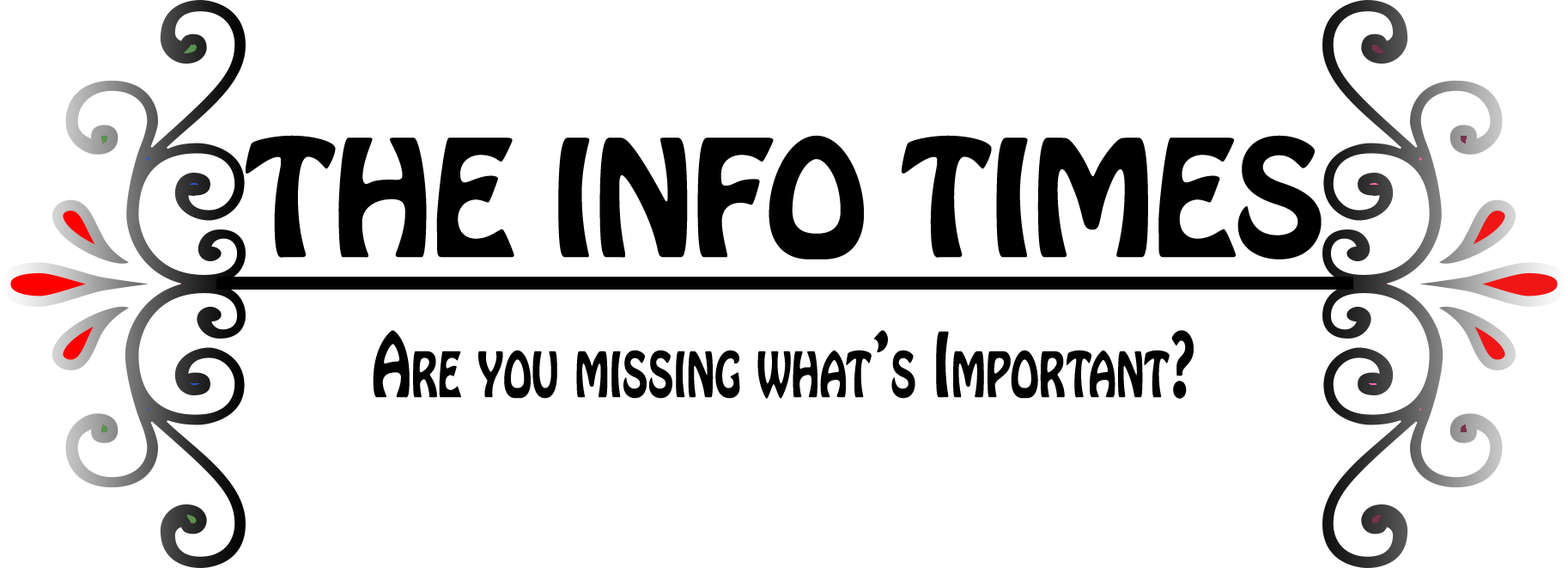
<style>
.page{position:relative;width:1568px;height:568px;background:#ffffff}
.page>*{position:absolute;margin:0}
.t1{font:143.1px "HoboStd";letter-spacing:-0.025em;color:#000000;text-transform:uppercase}
.t2{font:78.7px "HoboStd";color:#000000;font-variant:small-caps;scale:0.72 1}
</style>
<div class="page">
<p class="t1" style="left:246px;top:135px;width:1076px;height:124px">THE INFO TIMES</p>
<p class="t2" style="left:373px;top:330px;width:821px;height:68px">Are you missing what’s Important?</p>
</div>
